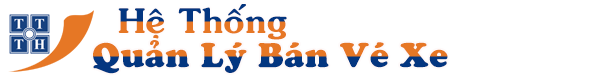
<style>
.page{position:relative;width:600px;height:80px;background:#ffffff}
.page>*{position:absolute;margin:0}
.t1{font:33.8px "VNI-Souvir-Bold"}
.t2{font:33.8px "VNICooperHeavy"}
</style>
<div class="page">
<p class="t1" style="left:118px;top:4px;width:169px;height:36px">Heä Thoáng</p>
<p class="t2" style="left:93px;top:40px;width:355px;height:34px">Quaûn Lyù Baùn Veù Xe</p>
</div>
